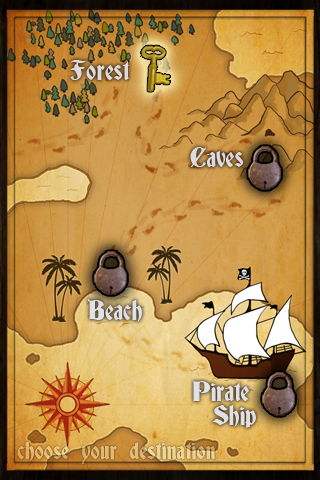
<style>
.page{position:relative;width:320px;height:480px}
.page>*{position:absolute;margin:0}
.t1{font:25.3px "Deutsch-Gothic";color:#e0e3f1}
.t2{font:25.3px/23.4px "Deutsch-Gothic";color:#e0e3f1}
.t3{font:23px "Deutsch-Gothic"}
</style>
<div class="page">
<p class="t1" style="left:70px;top:60px;width:59px;height:20px">Forest</p>
<p class="t1" style="left:190px;top:147px;width:54px;height:20px">Caves</p>
<p class="t1" style="left:87px;top:299px;width:55px;height:23px">Beach</p>
<p class="t2" style="left:193px;top:381px;width:63px;height:47px;text-align:center">Pirate  <br>Ship</p>
<p class="t3" style="left:17px;top:441px;width:199px;height:24px">choose your destination</p>
</div>
